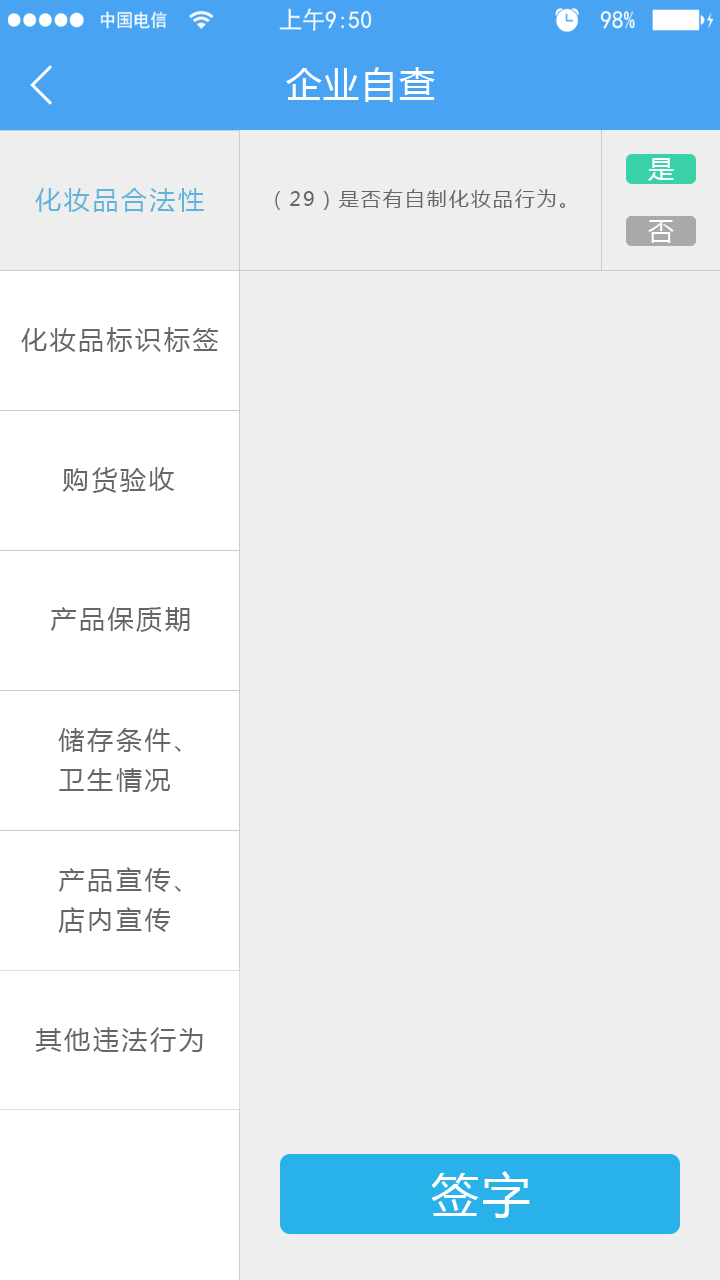
<style>
.page{position:relative;width:720px;height:1280px;background:#eeeeee}
.page>*{position:absolute;margin:0}
.t1{font:36px "MicrosoftYaHei";letter-spacing:0.05em;color:#ffffff}
.t2{font:26px "MicrosoftYaHei";letter-spacing:0.1em;color:#ffffff}
.t3{font:26px "MicrosoftYaHei";letter-spacing:0.1em;color:#60b4dc}
.t4{font:20px "MicrosoftYaHei";letter-spacing:0.1em;color:#666666}
.t5{font:26px "MicrosoftYaHei";letter-spacing:0.1em;color:#666666}
.t6{font:26px/40px "MicrosoftYaHei";letter-spacing:0.1em;color:#666666}
.t7{font:48px "MicrosoftYaHei";letter-spacing:0.05em;color:#ffffff}
</style>
<div class="page">
<p class="t1" style="left:286px;top:67px;width:149px;height:35px">企业自查</p>
<p class="t2" style="left:648px;top:158px;width:26px;height:23px">是</p>
<p class="t3" style="left:35px;top:188px;width:169px;height:24px">化妆品合法性</p>
<p class="t4" style="left:275px;top:189px;width:291px;height:21px">（29）是否有自制化妆品行为。</p>
<p class="t2" style="left:648px;top:220px;width:26px;height:23px">否</p>
<p class="t5" style="left:21px;top:327px;width:197px;height:25px">化妆品标识标签</p>
<p class="t5" style="left:62px;top:467px;width:113px;height:26px">购货验收</p>
<p class="t5" style="left:50px;top:607px;width:140px;height:25px">产品保质期</p>
<p class="t6" style="left:58px;top:728px;width:123px;height:64px">储存条件、<br>卫生情况</p>
<p class="t6" style="left:58px;top:867px;width:123px;height:66px">产品宣传、<br>店内宣传</p>
<p class="t5" style="left:35px;top:1027px;width:168px;height:25px">其他违法行为</p>
<p class="t7" style="left:431px;top:1171px;width:99px;height:47px">签字</p>
</div>
